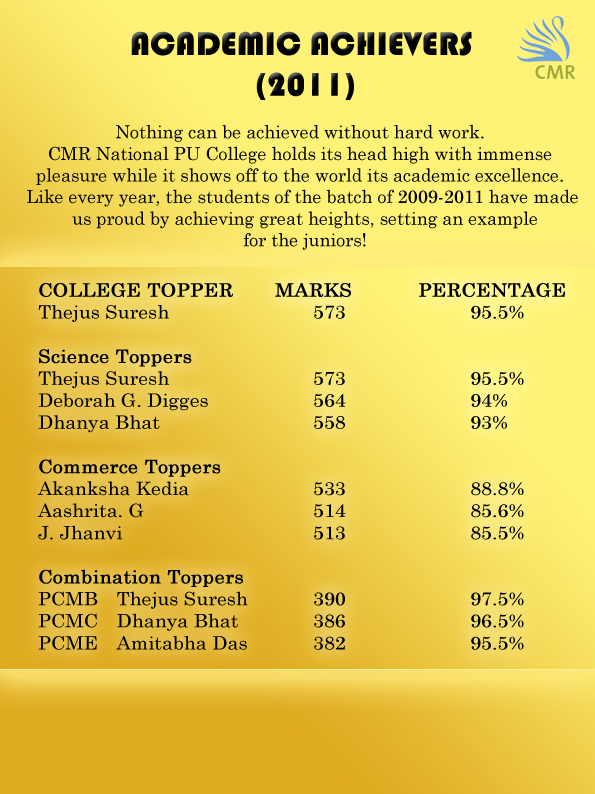
<style>
.page{position:relative;width:595px;height:794px}
.page>*{position:absolute;margin:0}
.t1{font:34px "Bauhaus93";color:#000000}
.t2{font:18px "CenturySchoolbook";color:#000000}
.t3{font:18.4px "CenturySchoolbook";color:#000000;scale:1.07 1}
.t4{font:18.4px "CenturySchoolbook";color:#000000;font-weight:bold;scale:1.07 1}
</style>
<div class="page">
<p class="t1" style="left:131px;top:31px;width:341px;height:69px;text-align:center">ACADEMIC ACHIEVERS <br>(2011)</p>
<p class="t2" style="left:27px;top:124px;width:551px;height:126px;text-align:center">Nothing can be achieved without hard work. <br>CMR National PU College holds its head high with immense <br>pleasure while it shows off to the world its academic excellence. <br>Like every year, the students of the batch of 2009-2011 have made<br> us proud by achieving great heights, setting an example<br> for the juniors!</p>
<p class="t3" style="left:37px;top:283px;width:528px;height:367px"><span class="t4">COLLEGE TOPPER       MARKS           PERCENTAGE<br></span>Thejus Suresh    573    95.5%<br>  <br><span class="t4">Science Toppers</span>  <br>Thejus Suresh    573    95.5%<br>Deborah G. Digges   564    94%<br>Dhanya Bhat    558    93%<br>  <br><span class="t4">Commerce Toppers</span>  <br>Akanksha Kedia    533    88.8%<br>Aashrita. G     514    85.6%<br>J. Jhanvi     513    85.5%<br>  <br><span class="t4">Combination Toppers </span> <br>PCMB Thejus Suresh  390    97.5%<br>PCMC Dhanya Bhat  386    96.5%<br>PCME Amitabha Das  382    95.5%</p>
</div>
